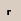
<style>
.page{position:relative;width:21px;height:21px;background:#d9cdc1}
.page>*{position:absolute;margin:0}
.t1{font:9px "Tahoma-Bold";color:#000000}
</style>
<div class="page">
<p class="t1" style="left:7px;top:10px;width:4px;height:5px">r</p>
</div>
